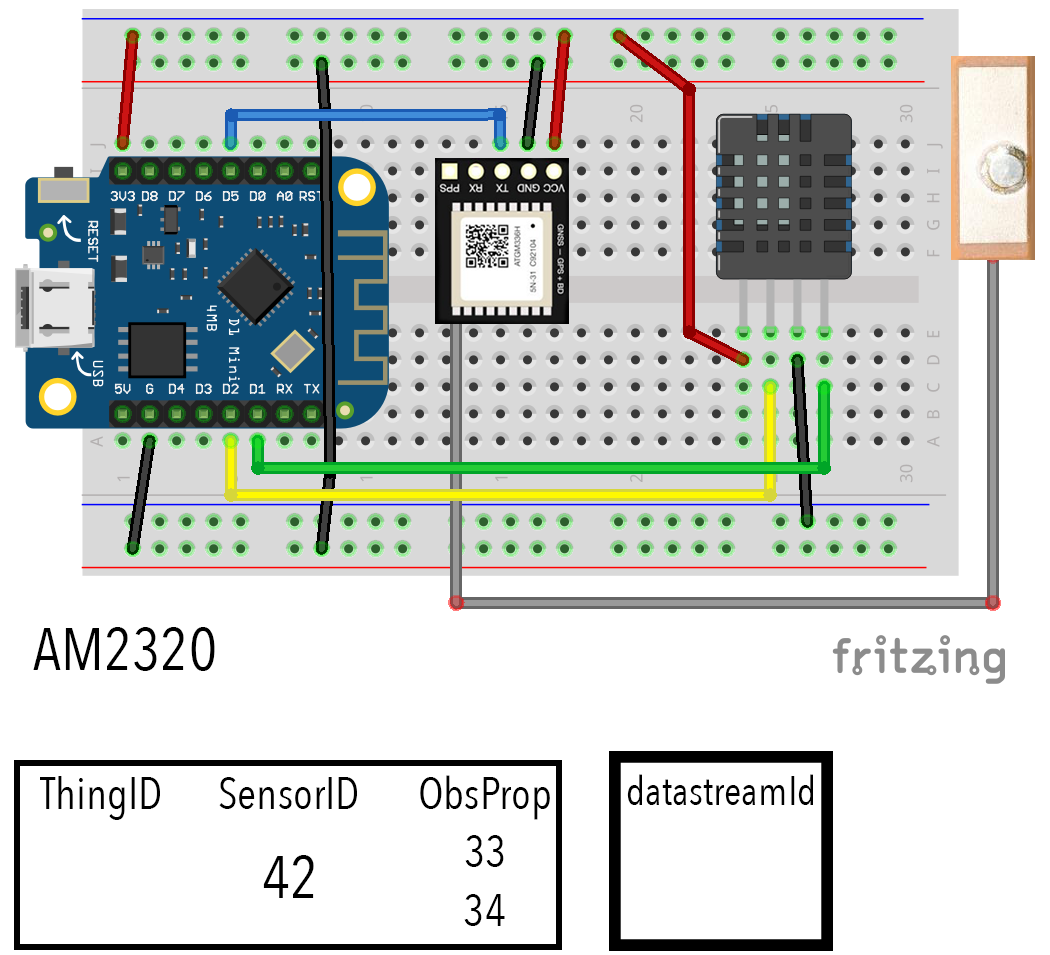
<style>
.page{position:relative;width:1050px;height:955px;background:#ffffff}
.page>*{position:absolute;margin:0}
.t1{font:60px "AvenirNextCondensed-Regular";color:#000000}
.t2{font:41.2px "AvenirNextCondensed-Regular";color:#000000}
.t3{font:45px "AvenirNextCondensed-Regular";color:#000000}
</style>
<div class="page">
<p class="t1" style="left:33px;top:627px;width:182px;height:44px">AM2320</p>
<p class="t2" style="left:627px;top:774px;width:186px;height:31px">datastreamId</p>
<p class="t3" style="left:40px;top:776px;width:120px;height:44px">ThingID</p>
<p class="t3" style="left:219px;top:777px;width:138px;height:32px">SensorID</p>
<p class="t3" style="left:420px;top:775px;width:130px;height:45px">ObsProp</p>
<p class="t3" style="left:465px;top:835px;width:39px;height:32px">33</p>
<p class="t1" style="left:263px;top:855px;width:51px;height:43px">42</p>
<p class="t3" style="left:464px;top:894px;width:41px;height:32px">34</p>
</div>
